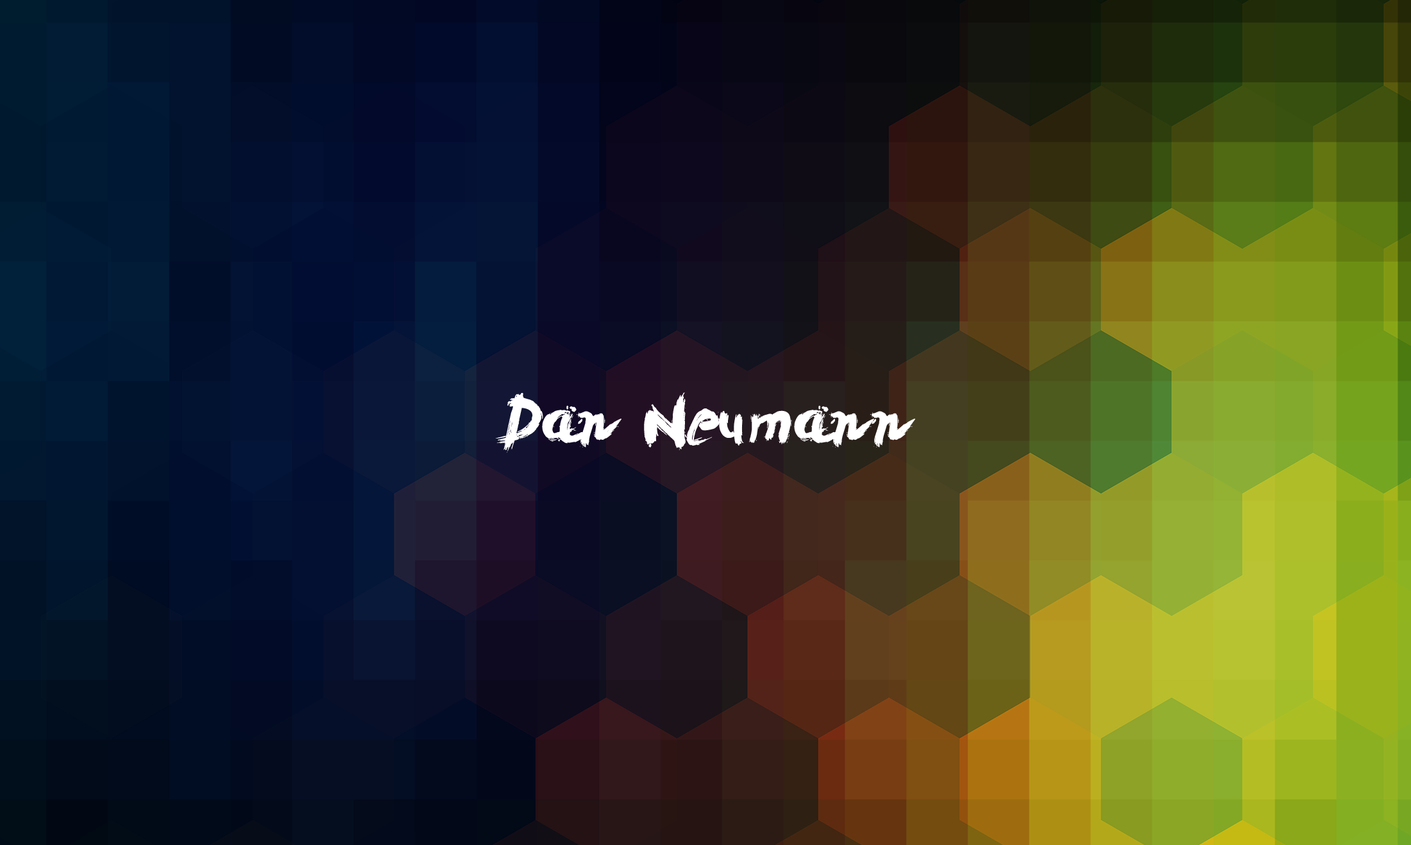
<style>
.page{position:relative;width:1411px;height:845px}
.page>*{position:absolute;margin:0}
.t1{font:64.1px "LeviBrush";color:#ffffff}
</style>
<div class="page">
<p class="t1" style="left:496px;top:392px;width:419px;height:61px">Dan Neumann</p>
</div>
